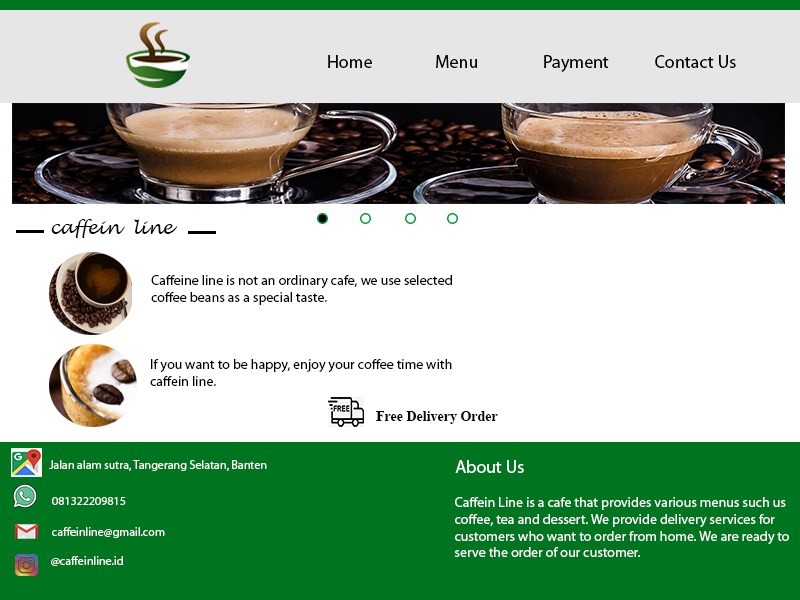
<style>
.page{position:relative;width:800px;height:600px;background:#ffffff}
.page>*{position:absolute;margin:0}
.t1{font:18px "MyriadPro-Regular";color:#000000}
.t2{font:18px "LucidaHandwriting-Italic";color:#070707}
.t3{font:14px "MyriadPro-Regular";color:#000000}
.t4{font:14px "TimesNewRomanPS-BoldMT";color:#070707}
.t5{font:12px "MyriadPro-Regular";color:#f9f1f1}
.t6{font:18px "MyriadPro-Regular";color:#fbf8f8}
.t7{font:14px "MyriadPro-Regular";color:#fbf8f8}
.t8{font:12px "MyriadPro-Regular";color:#faf3f3}
.t9{font:12px "MyriadPro-Regular";color:#fbf4f4}
</style>
<div class="page">
<p class="t1" style="left:328px;top:55px;width:408px;height:17px">Home  Menu  Payment   Contact Us</p>
<p class="t2" style="left:51px;top:219px;width:127px;height:19px">caffein  line</p>
<p class="t3" style="left:151px;top:275px;width:301px;height:30px">Caffeine line is not an ordinary cafe, we use selected coffee beans as a special taste.</p>
<p class="t3" style="left:150px;top:359px;width:302px;height:27px">If you want to be happy, enjoy your coffee time with caffein line.</p>
<p class="t4" style="left:376px;top:411px;width:122px;height:13px">Free Delivery Order</p>
<p class="t5" style="left:49px;top:460px;width:218px;height:11px">Jalan alam sutra, Tangerang Selatan, Banten</p>
<p class="t6" style="left:455px;top:460px;width:69px;height:13px">About Us</p>
<p class="t5" style="left:52px;top:497px;width:74px;height:8px">081322209815</p>
<p class="t7" style="left:454px;top:497px;width:335px;height:60px">Caffein Line is a cafe that provides various menus such us coffee, tea and dessert. We provide delivery services for customers who want to order from home. We are ready to serve the order of our customer.</p>
<p class="t8" style="left:52px;top:527px;width:113px;height:11px">caffeinline@gmail.com</p>
<p class="t9" style="left:51px;top:556px;width:72px;height:10px">@caffeinline.id</p>
</div>
